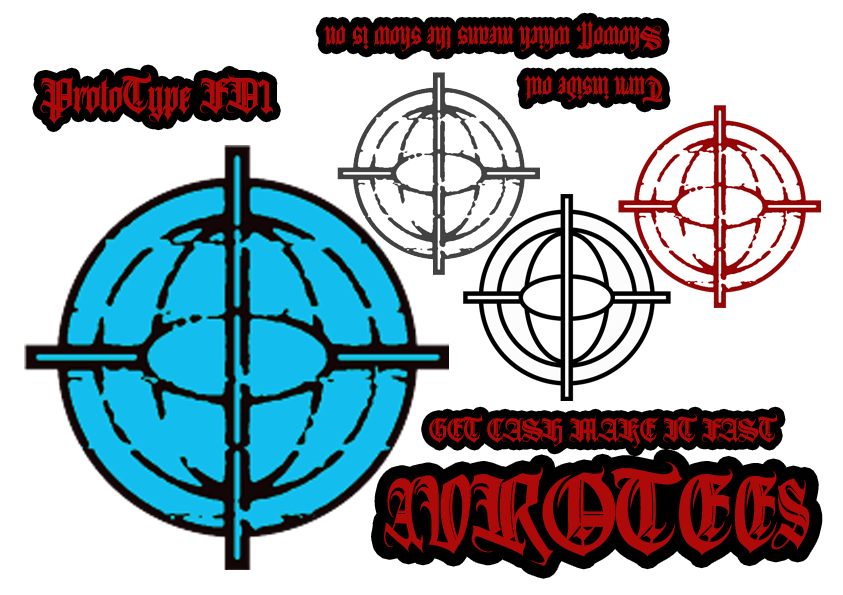
<style>
.page{position:relative;width:843px;height:595px;background:#ffffff}
.page>*{position:absolute;margin:0}
.t1{font:41.8px "AvestravaTattooPersonalUseOnly";color:#af0a0a}
.t2{font:60.3px "AvestravaTattooPersonalUseOnly";color:#af0a0a}
.t3{font:40.3px "AvestravaTattooPersonalUseOnly";color:#af0a0a}
.t4{font:111.7px "AvestravaTattooPersonalUseOnly";color:#af0a0a}
</style>
<div class="page">
<p class="t1" style="left:323px;top:20px;width:340px;height:85px;rotate:180deg">Turn inside out<br>Showoff, which means the show is on</p>
<p class="t2" style="left:40px;top:72px;width:233px;height:53px">ProtoType FD1</p>
<p class="t3" style="left:429px;top:414px;width:349px;height:35px">GET CASH MAKE IT FAST</p>
<p class="t4" style="left:384px;top:461px;width:426px;height:105px">AVROTEES</p>
</div>
